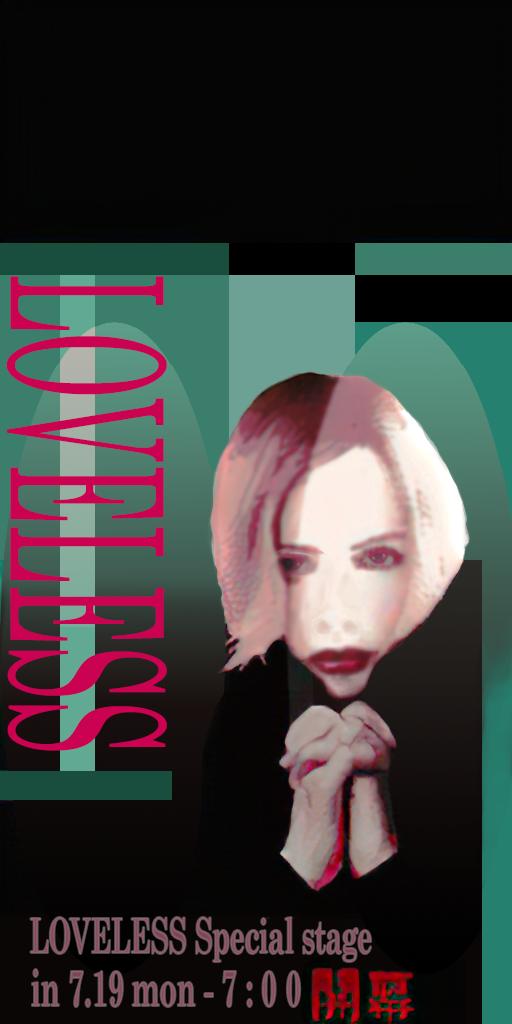
<style>
.page{position:relative;width:512px;height:1024px}
.page>*{position:absolute;margin:0}
.t1{font:212.1px "CenturySchoolbook";color:#ca0251;scale:0.41 1}
.t2{font:48.6px "CenturySchoolbook-Bold";letter-spacing:-0.005em;color:#7c4557;scale:0.56 1}
.t3{font:51.1px "CenturySchoolbook-Bold";letter-spacing:-0.005em;color:#7c4557;scale:0.56 1}
</style>
<div class="page">
<p class="t1" style="left:6px;top:276px;width:161px;height:475px;rotate:90deg">LOVELESS</p>
<p class="t2" style="left:30px;top:917px;width:342px;height:45px">LOVELESS Special stage</p>
<p class="t3" style="left:32px;top:969px;width:269px;height:38px">in 7.19 mon - 7 : 0 0</p>
</div>
